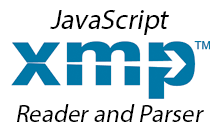
<style>
.page{position:relative;width:220px;height:130px;background:#ffffff}
.page>*{position:absolute;margin:0}
.t1{font:28px "MyriadPro-Regular";color:#000000;font-style:italic}
.t2{font:25px "MyriadPro-Regular";color:#000000;font-style:italic}
</style>
<div class="page">
<p class="t1" style="left:50px;top:10px;width:119px;height:25px">JavaScript</p>
<p class="t2" style="left:17px;top:104px;width:187px;height:18px">Reader and Parser</p>
</div>
